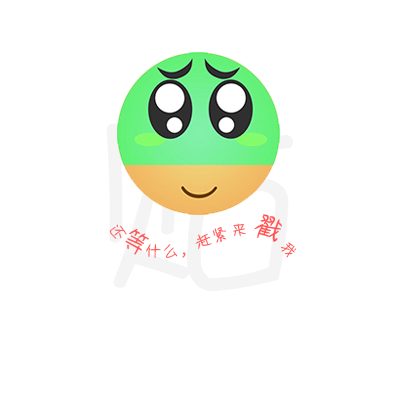
<style>
.page{position:relative;width:400px;height:400px;background:#ffffff}
.page>*{position:absolute;margin:0}
.t1{font:18px "MDT_1_95969";color:#ff5555}
.t2{font:30px "MDT_1_95969";color:#ff5555}
</style>
<div class="page">
<p class="t1" style="left:109px;top:214px;width:187px;height:44px">还<span class="t2">等</span>什么，赶紧来<span class="t2">戳</span>我</p>
</div>
